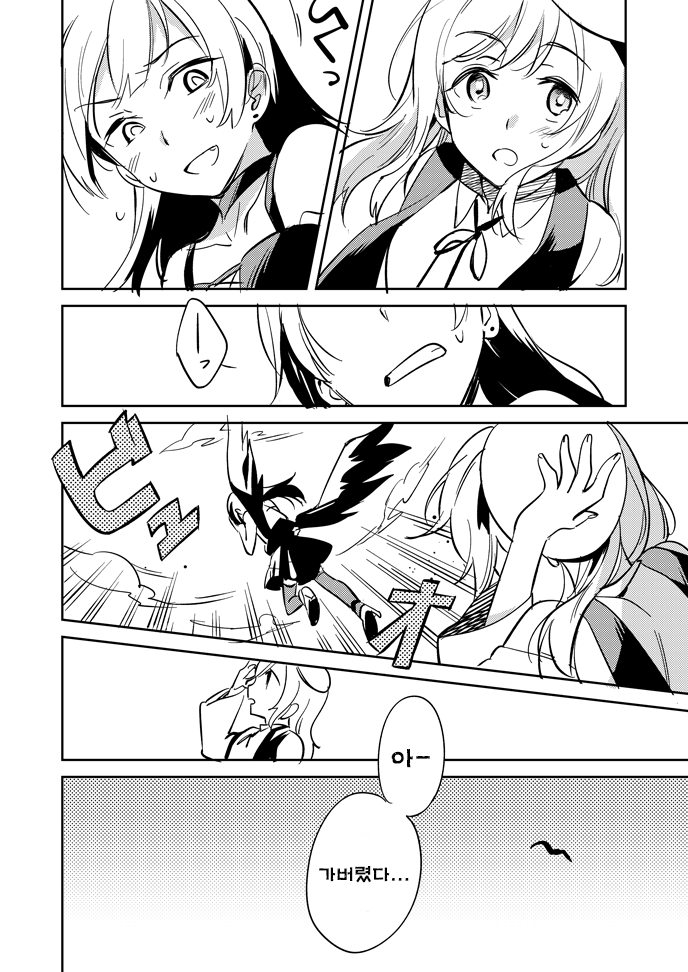
<style>
.page{position:relative;width:688px;height:972px;background:#ffffff}
.page>*{position:absolute;margin:0}
.t1{font:24px "H2mkpB";color:#030303}
.t2{font:18px "H2mkpB";color:#030303}
</style>
<div class="page">
<p class="t1" style="left:391px;top:749px;width:39px;height:19px">아-</p>
<p class="t2" style="left:319px;top:866px;width:90px;height:17px">가버렸다...</p>
</div>
